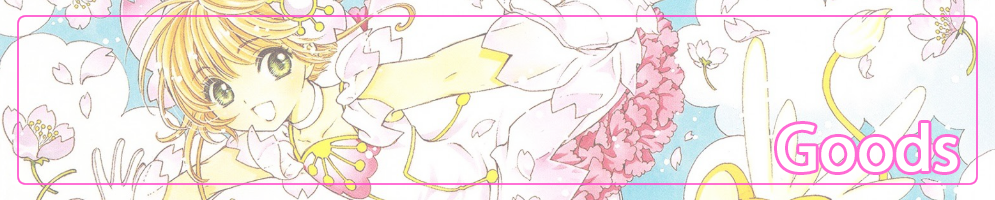
<style>
.page{position:relative;width:995px;height:200px}
.page>*{position:absolute;margin:0}
.t1{font:66.7px "MyriadPro-Regular";color:#ffffff;font-weight:bold}
</style>
<div class="page">
<p class="t1" style="left:777px;top:123px;width:181px;height:49px">Goods</p>
</div>
